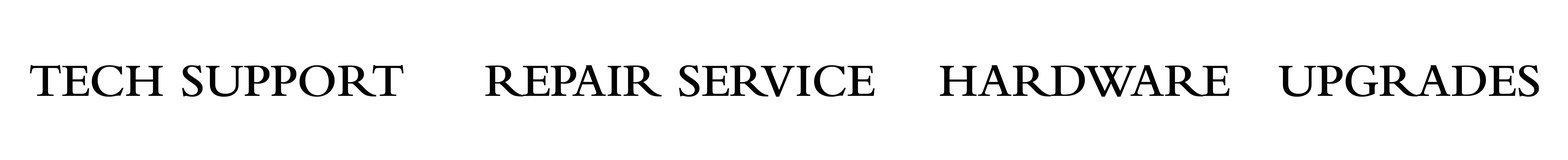
<style>
.page{position:relative;width:1568px;height:160px;background:#ffffff}
.page>*{position:absolute;margin:0}
.t1{font:48px "BemboMT-SemiBold";color:#030303}
</style>
<div class="page">
<p class="t1" style="left:30px;top:65px;width:1509px;height:31px">TECH SUPPORT     REPAIR SERVICE    HARDWARE   UPGRADES</p>
</div>
